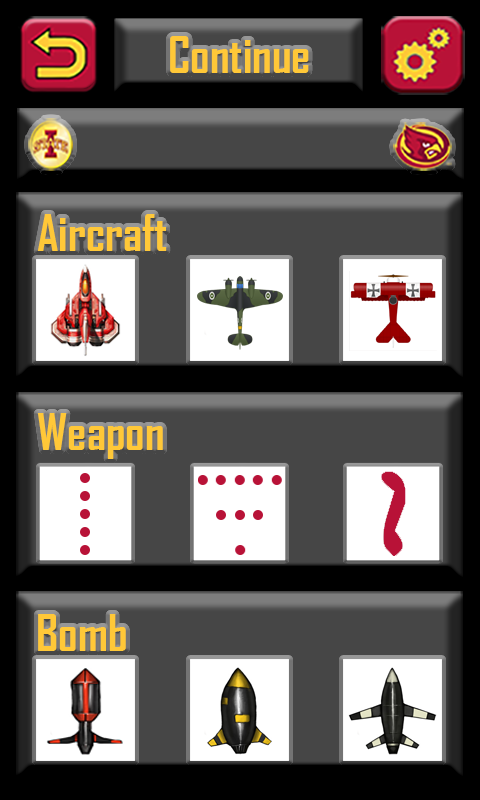
<style>
.page{position:relative;width:480px;height:800px;background:#000000}
.page>*{position:absolute;margin:0}
.t1{font:48px "AgencyFB-Bold";color:#ffc838}
</style>
<div class="page">
<p class="t1" style="left:170px;top:36px;width:139px;height:37px">Continue</p>
<p class="t1" style="left:37px;top:214px;width:130px;height:37px">Aircraft</p>
<p class="t1" style="left:37px;top:413px;width:126px;height:46px">Weapon</p>
<p class="t1" style="left:38px;top:614px;width:88px;height:37px">Bomb</p>
</div>
